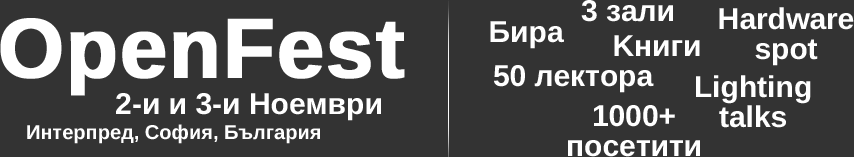
<style>
.page{position:relative;width:854px;height:157px;background:#333333}
.page>*{position:absolute;margin:0}
.t1{font:30px "Arimo-Bold";color:#ffffff}
.t2{font:30px/30px "Arimo-Bold";color:#ffffff}
.t3{font:84.6px "Arimo-Bold";color:#ffffff;font-weight:bold}
.t4{font:20px "Arimo-Bold";color:#ffffff}
</style>
<div class="page">
<p class="t1" style="left:581px;top:0px;width:92px;height:22px">3 зали</p>
<p class="t2" style="left:719px;top:7px;width:135px;height:59px;text-align:center">Hardware<br>spot</p>
<p class="t3" style="left:0px;top:18px;width:405px;height:78px">OpenFest</p>
<p class="t1" style="left:490px;top:21px;width:74px;height:28px">Бира</p>
<p class="t1" style="left:614px;top:35px;width:86px;height:21px">Kниги</p>
<p class="t1" style="left:494px;top:65px;width:160px;height:28px">50 лектора</p>
<p class="t2" style="left:696px;top:75px;width:115px;height:53px;text-align:center">Lighting<br>talks</p>
<p class="t1" style="left:116px;top:93px;width:265px;height:28px">2-и и 3-и Ноември</p>
<p class="t2" style="left:568px;top:105px;width:132px;height:52px;text-align:center">1000+<br>посетити</p>
<p class="t4" style="left:27px;top:124px;width:293px;height:20px">Интерпред, София, България</p>
</div>
